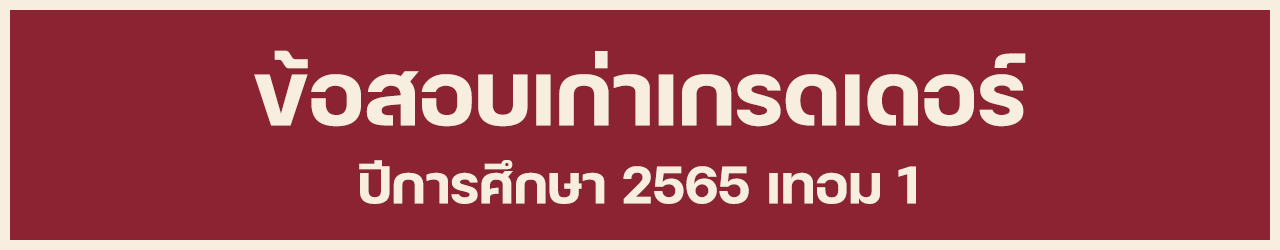
<style>
.page{position:relative;width:1280px;height:250px;background:#8b2332}
.page>*{position:absolute;margin:0}
.t1{font:120px "FCMinimalBold";color:#f8eedf}
.t2{font:72px "FCMinimalBold";color:#f8eedf}
</style>
<div class="page">
<p class="t1" style="left:254px;top:50px;width:772px;height:77px">ข้อสอบเก่าเกรดเดอร์</p>
<p class="t2" style="left:359px;top:160px;width:557px;height:44px">ปีการศึกษา 2565 เทอม 1</p>
</div>
